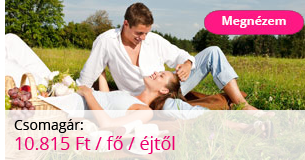
<style>
.page{position:relative;width:305px;height:160px}
.page>*{position:absolute;margin:0}
.t1{font:18px/20px "OpenSans";color:#ec006e}
.t2{font:14px/20px "OpenSans";color:#000000}
</style>
<div class="page">
<p class="t1" style="left:14px;top:119px;width:161px;height:35px"><span class="t2">Csomagár: <br></span>10.815 Ft / fő / éjtől</p>
</div>
